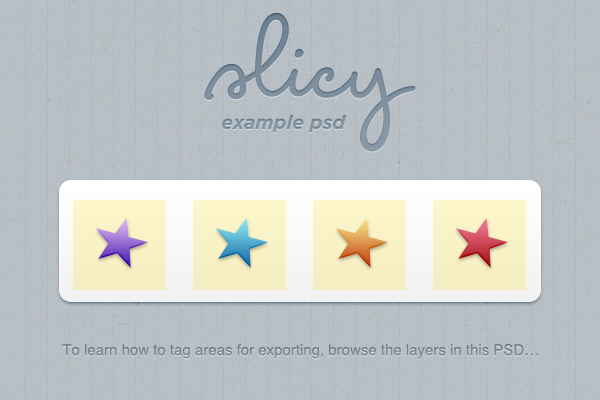
<style>
.page{position:relative;width:600px;height:400px}
.page>*{position:absolute;margin:0}
.t1{font:15px "Helvetica";color:#778695}
</style>
<div class="page">
<p class="t1" style="left:62px;top:344px;width:476px;height:15px">To learn how to tag areas for exporting, browse the layers in this PSD…</p>
</div>
